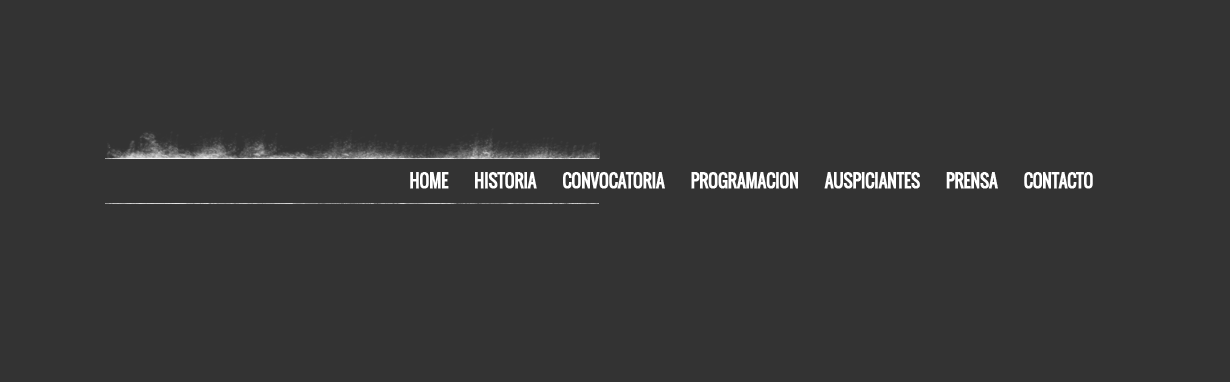
<style>
.page{position:relative;width:1230px;height:382px;background:#333333}
.page>*{position:absolute;margin:0}
.t1{font:17.7px "Oswald-Regular";letter-spacing:-0.04em;color:#ffffff;font-weight:bold}
</style>
<div class="page">
<p class="t1" style="left:410px;top:172px;width:683px;height:17px">HOME        HISTORIA        CONVOCATORIA        PROGRAMACION        AUSPICIANTES        PRENSA        CONTACTO</p>
</div>
